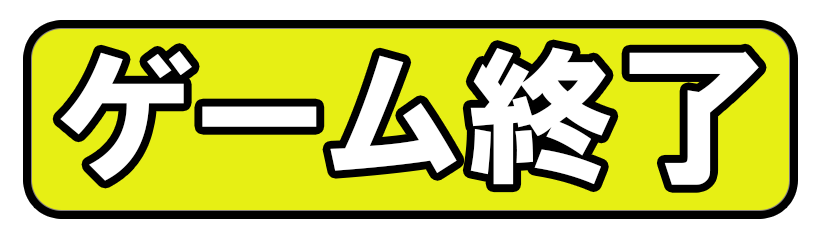
<style>
.page{position:relative;width:824px;height:239px;background:#e7ef14}
.page>*{position:absolute;margin:0}
.t1{font:150px "HGPSoeiKakugothicUB";letter-spacing:0.025em;color:#ffffff}
</style>
<div class="page">
<p class="t1" style="left:60px;top:47px;width:699px;height:138px">ゲーム終了</p>
</div>
